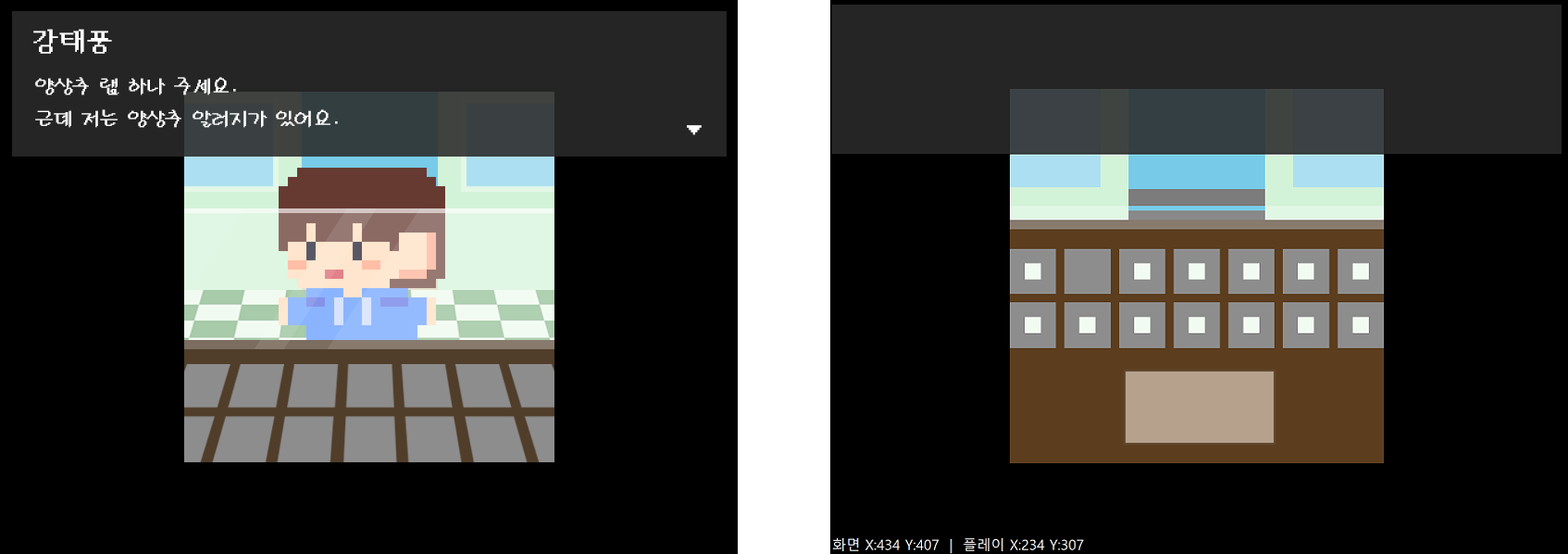
<style>
.page{position:relative;width:1568px;height:554px;background:#000000}
.page>*{position:absolute;margin:0}
.t1{font:27.8px "DOSIyagiMedium";color:#ffffff}
.t2{font:18.5px "DOSPilgiMedium";color:#ffffff}
.t3{font:18.5px "DOSPilgiMedium";color:#ffffff;scale:1.8 1}
</style>
<div class="page">
<p class="t1" style="left:33px;top:29px;width:79px;height:25px">강태풍</p>
<p class="t2" style="left:35px;top:77px;width:303px;height:51px">양상추 랩 하나 주세요.<br>근데 저는 양상추 알러지가 있어요.</p>
<p class="t3" style="left:687px;top:125px;width:15px;height:10px">▼</p>
</div>
